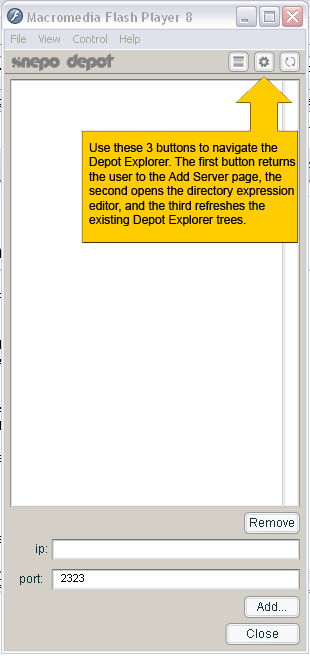
<style>
.page{position:relative;width:310px;height:656px;background:#ffffff}
.page>*{position:absolute;margin:0}
.t1{font:12px "ArialMT";color:#000000}
</style>
<div class="page">
<p class="t1" style="left:89px;top:143px;width:207px;height:83px">Use these 3 buttons to navigate the<br>Depot Explorer. The first button returns<br>the user to the Add Server page, the<br>second opens the directory expression<br>editor, and the third refreshes the<br>existing Depot Explorer trees.</p>
</div>
